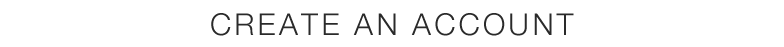
<style>
.page{position:relative;width:784px;height:47px;background:#ffffff}
.page>*{position:absolute;margin:0}
.t1{font:30px "HelveticaNeue-Light";letter-spacing:0.11em;color:#2a2a2a}
</style>
<div class="page">
<p class="t1" style="left:211px;top:13px;width:363px;height:23px">CREATE AN ACCOUNT</p>
</div>
